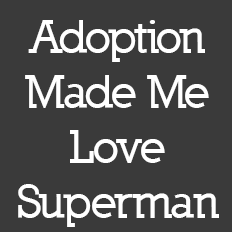
<style>
.page{position:relative;width:232px;height:232px;background:#3a3a3a}
.page>*{position:absolute;margin:0}
.t1{font:45.8px "Nilland-ExtraBold";color:#ffffff}
</style>
<div class="page">
<p class="t1" style="left:18px;top:20px;width:201px;height:207px;text-align:center">Adoption Made Me Love <br>Superman</p>
</div>
